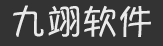
<style>
.page{position:relative;width:163px;height:46px;background:#333333}
.page>*{position:absolute;margin:0}
.t1{font:36px "YuppySC-Regular";letter-spacing:-0.005em;color:#eaeaea}
</style>
<div class="page">
<p class="t1" style="left:13px;top:5px;width:138px;height:32px">九翊软件</p>
</div>
